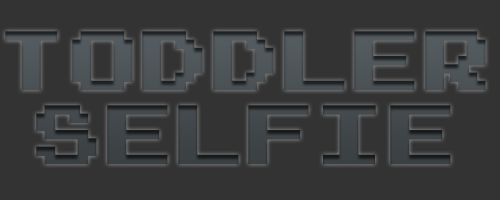
<style>
.page{position:relative;width:500px;height:200px;background:#333333}
.page>*{position:absolute;margin:0}
.t1{font:90px/74px "Joystix";color:#43494c;font-weight:bold}
</style>
<div class="page">
<p class="t1" style="left:5px;top:31px;width:481px;height:134px;text-align:center">TODDLER<br>SELFIE</p>
</div>
